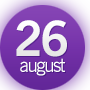
<style>
.page{position:relative;width:90px;height:90px}
.page>*{position:absolute;margin:0}
.t1{font:48px "NewsGothicBT-Bold";letter-spacing:-0.075em;color:#ffffff}
.t2{font:19px "NewsGothicBT-Roman";letter-spacing:-0.075em;color:#ffffff}
</style>
<div class="page">
<p class="t1" style="left:16px;top:20px;width:51px;height:37px">26</p>
<p class="t2" style="left:20px;top:58px;width:45px;height:18px">august</p>
</div>
